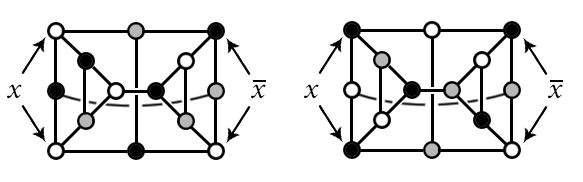
<style>
.page{position:relative;width:583px;height:182px;background:#ffffff}
.page>*{position:absolute;margin:0}
.t1{font:30px "MinionPro-It";color:#000000}
</style>
<div class="page">
<p class="t1" style="left:7px;top:84px;width:15px;height:15px">x</p>
<p class="t1" style="left:251px;top:84px;width:15px;height:15px">x</p>
<p class="t1" style="left:304px;top:84px;width:15px;height:15px">x</p>
<p class="t1" style="left:548px;top:84px;width:15px;height:15px">x</p>
</div>
